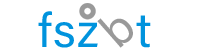
<style>
.page{position:relative;width:199px;height:48px;background:#ffffff}
.page>*{position:absolute;margin:0}
.t1{font:48px "AcuminConcept-Regular";letter-spacing:0.025em;color:#0093dd;font-weight:bold;font-style:italic}
.t2{font:48px "AcuminConcept-Regular";color:#0093dd;font-weight:bold;font-style:italic}
.t3{font:48px "AcuminConcept-Regular";color:#999999;font-weight:bold;font-style:italic}
</style>
<div class="page">
<p class="t1" style="left:38px;top:11px;width:60px;height:37px">fsz</p>
<p class="t2" style="left:136px;top:15px;width:15px;height:33px">t</p>
<p class="t3" style="left:97px;top:18px;width:36px;height:30px;rotate:-41deg">b</p>
</div>
